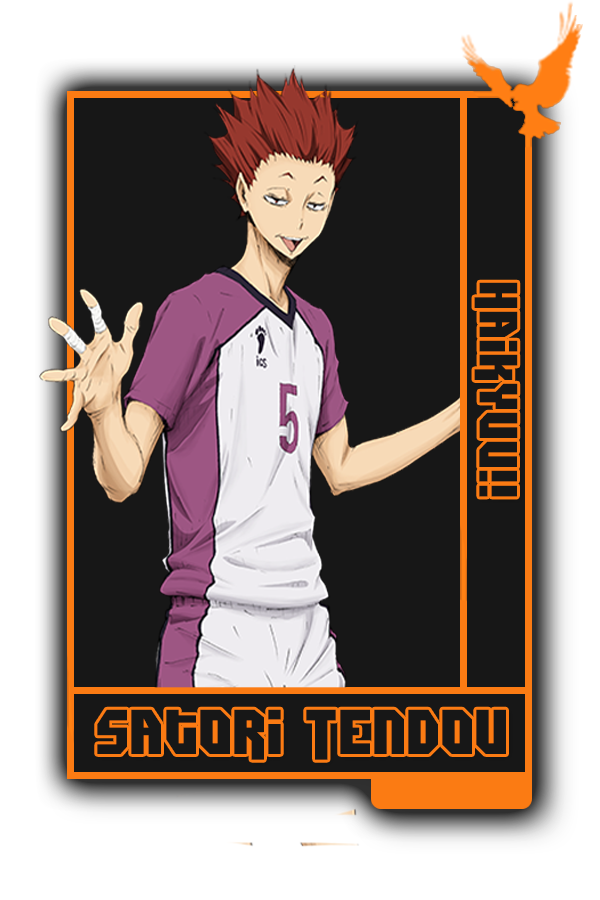
<style>
.page{position:relative;width:600px;height:900px;background:#171717}
.page>*{position:absolute;margin:0}
.t1{font:53.7px "Dimitri";color:#171717}
.t2{font:63.1px "Dimitri";color:#171717}
</style>
<div class="page">
<p class="t1" style="left:474px;top:282px;width:44px;height:215px;rotate:90deg">Haikyuu!!</p>
<p class="t2" style="left:97px;top:709px;width:409px;height:51px">Satori Tendou</p>
</div>
